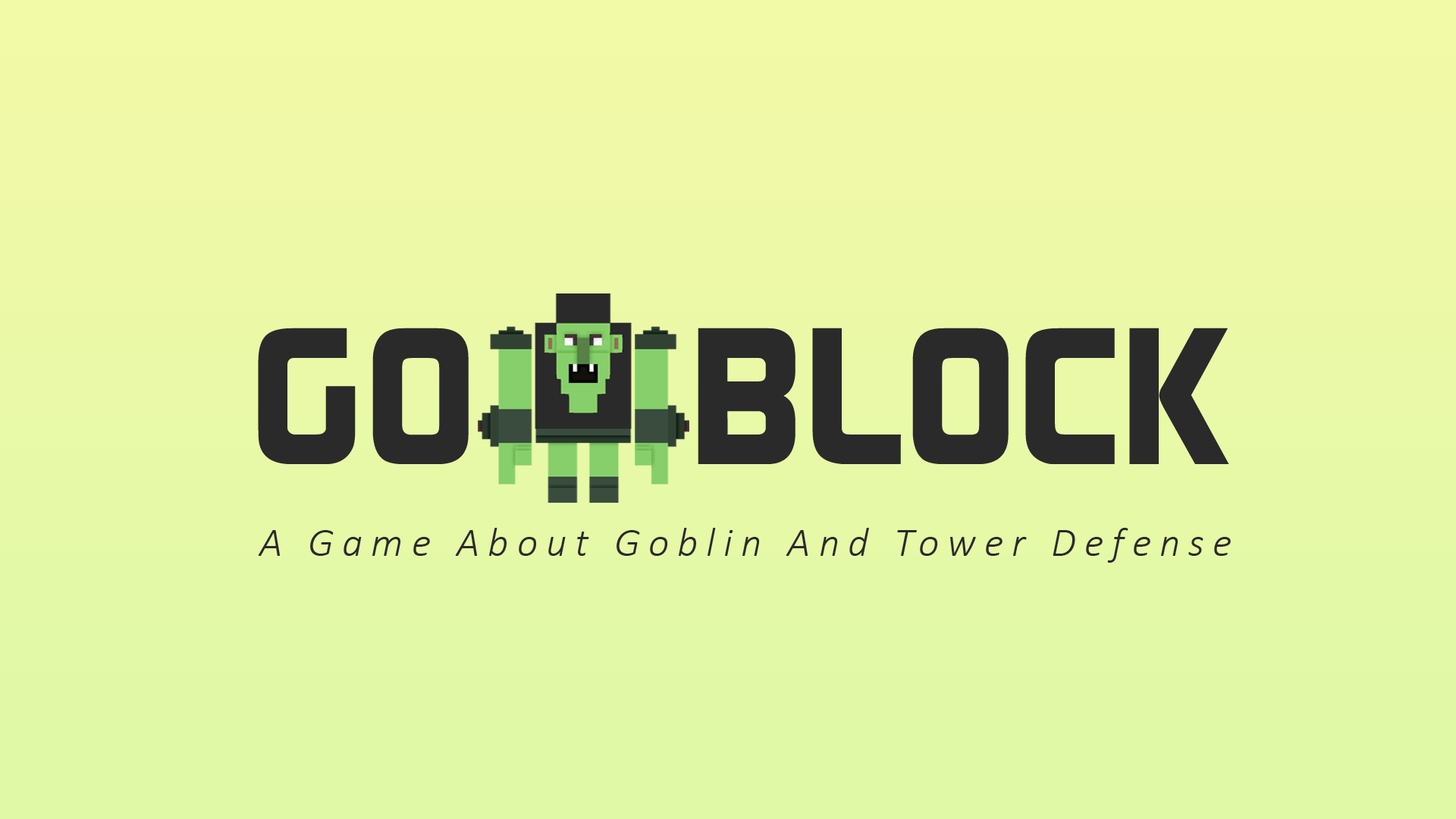
<style>
.page{position:relative;width:1456px;height:819px}
.page>*{position:absolute;margin:0}
.t1{font:193.4px "ContinuumBold";color:#2a2a2a}
.t2{font:41.1px "Calibri-LightItalic";letter-spacing:0.2em;color:#2a2a2a}
</style>
<div class="page">
<p class="t1" style="left:258px;top:328px;width:211px;height:136px">GO</p>
<p class="t1" style="left:698px;top:328px;width:531px;height:136px">BLOCK</p>
<p class="t2" style="left:258px;top:528px;width:973px;height:35px">A Game About Goblin And Tower Defense</p>
</div>
